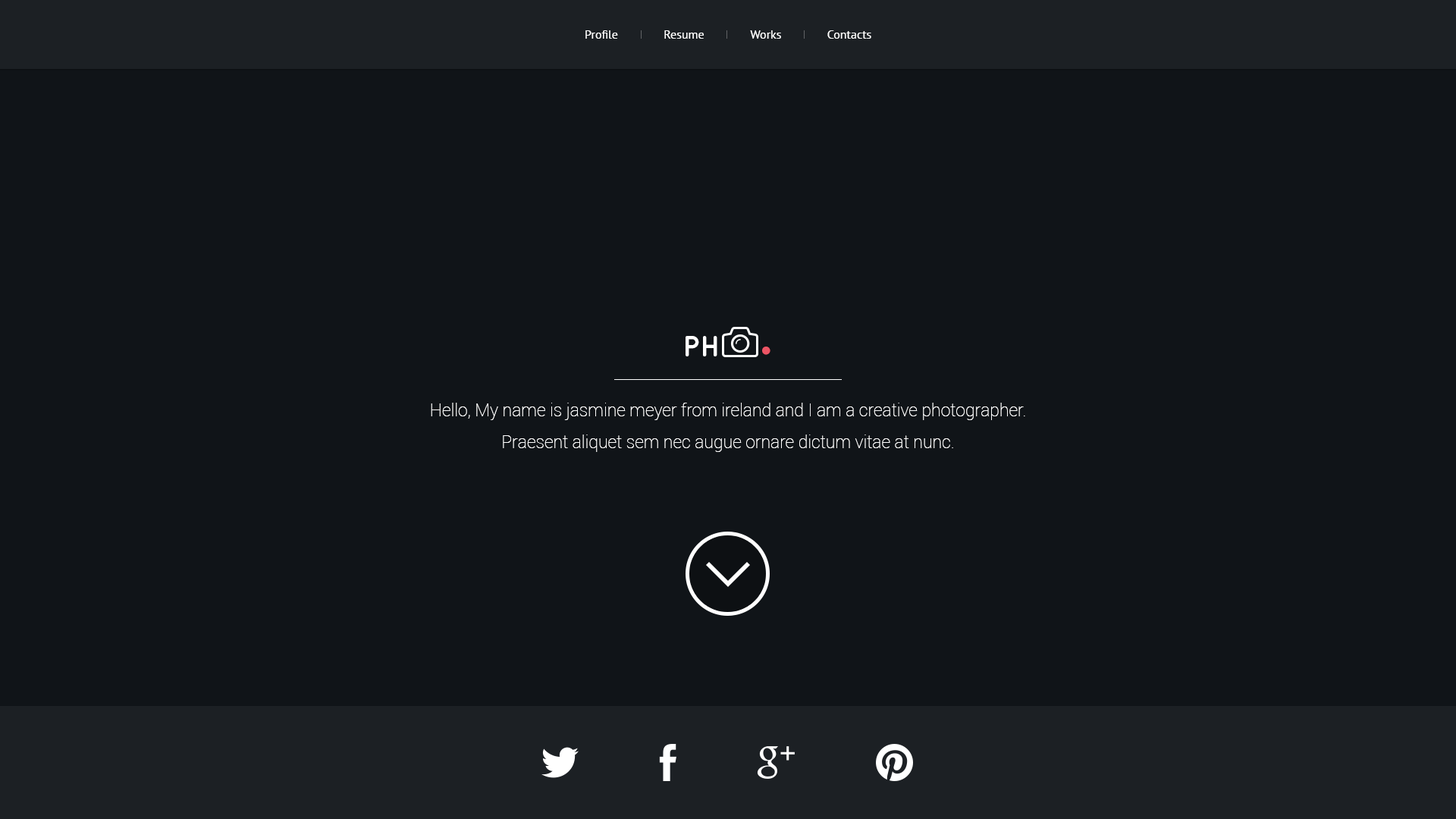
<style>
.page{position:relative;width:1456px;height:819px;background:#101418}
.page>*{position:absolute;margin:0}
.t1{font:12.1px "PTSans-Regular";color:#ffffff}
.t2{font:29.2px "QuicksandBold-Regular";color:#ffffff}
.t3{font:53.9px "QuicksandBold-Regular";color:#ed5565}
.t4{font:17.4px/31.8px "Roboto-Thin";color:#ffffff}
</style>
<div class="page">
<p class="t1" style="left:585px;top:30px;width:33px;height:9px">Profile</p>
<p class="t1" style="left:664px;top:30px;width:40px;height:9px">Resume</p>
<p class="t1" style="left:750px;top:30px;width:31px;height:9px">Works</p>
<p class="t1" style="left:827px;top:30px;width:44px;height:9px">Contacts</p>
<p class="t2" style="left:686px;top:336px;width:31px;height:20px">PH</p>
<p class="t3" style="left:762px;top:347px;width:8px;height:8px">.</p>
<p class="t4" style="left:431px;top:403px;width:594px;height:49px;text-align:center">Hello, My name is jasmine meyer from ireland and I am a creative photographer.<br>Praesent aliquet sem nec augue ornare dictum vitae at nunc.</p>
</div>
